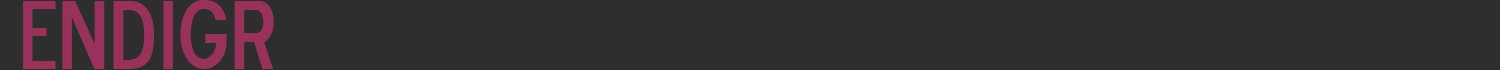
<style>
.page{position:relative;width:1500px;height:70px;background:#2e2e2e}
.page>*{position:absolute;margin:0}
.t1{font:97px "BlueHighwayDType";color:#99325b}
</style>
<div class="page">
<p class="t1" style="left:23px;top:0px;width:251px;height:69px">endigr</p>
</div>
